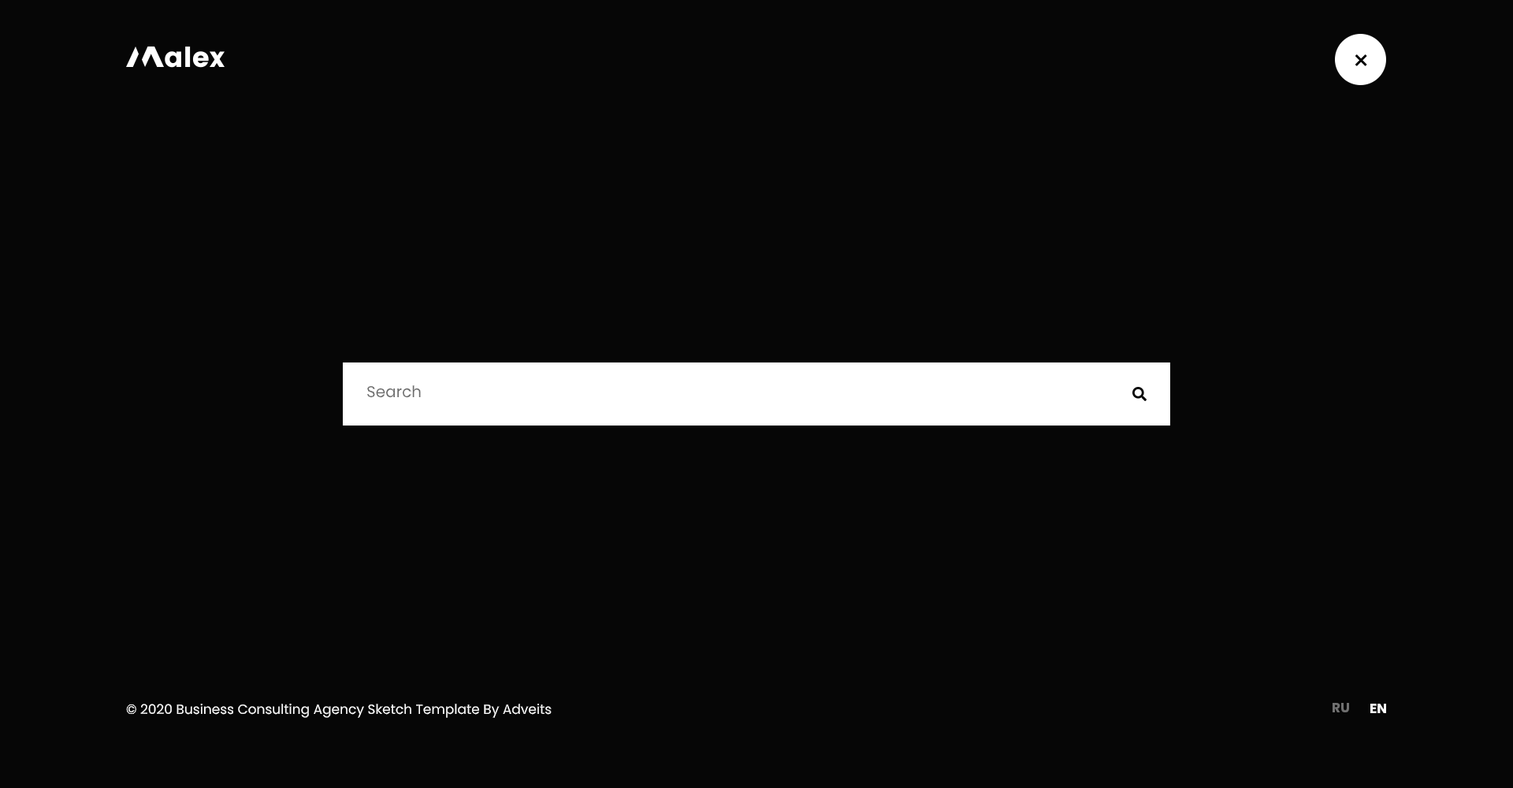
<style>
.page{position:relative;width:1513px;height:788px;background:#060606}
.page>*{position:absolute;margin:0}
.t1{font:15.8px "Poppins-Regular";color:#6c6c6c}
.t2{font:13.4px "Poppins-Regular";color:#ffffff}
.t3{font:13.4px "Poppins-Bold";color:#707070}
.t4{font:13.4px "Poppins-Bold";color:#ffffff}
</style>
<div class="page">
<p class="t1" style="left:367px;top:385px;width:54px;height:13px">Search</p>
<p class="t2" style="left:126px;top:704px;width:426px;height:14px">© 2020 Business Consulting Agency Sketch Template By Adveits</p>
<p class="t3" style="left:1333px;top:703px;width:16px;height:9px">RU</p>
<p class="t4" style="left:1370px;top:704px;width:16px;height:9px">EN</p>
</div>
